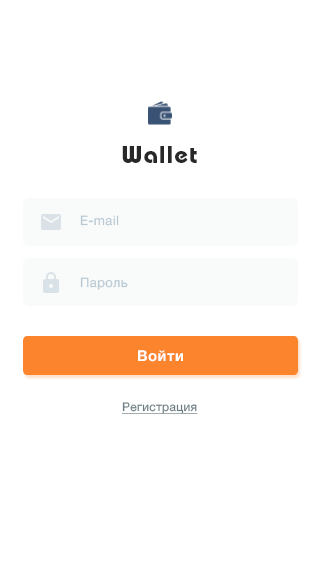
<style>
.page{position:relative;width:320px;height:568px;background:#ffffff}
.page>*{position:absolute;margin:0}
.t1{font:24px "BauhausC-Bold";letter-spacing:0.06em;color:#282828}
.t2{font:13px "HelveticaNeueCyr-Roman";letter-spacing:0.03em;color:#b9c9d4}
.t3{font:15px "HelveticaNeueCyr-Bold";letter-spacing:0.03em;color:#ffffff}
.t4{font:12px "HelveticaNeueCyr-Roman";letter-spacing:0.03em;color:#6b7d83;text-decoration:underline}
</style>
<div class="page">
<p class="t1" style="left:122px;top:146px;width:75px;height:17px">Wallet</p>
<p class="t2" style="left:80px;top:215px;width:39px;height:11px">E-mail</p>
<p class="t2" style="left:80px;top:277px;width:48px;height:13px">Пароль</p>
<p class="t3" style="left:138px;top:350px;width:45px;height:12px">Войти</p>
<p class="t4" style="left:122px;top:402px;width:76px;height:12px">Регистрация</p>
</div>
